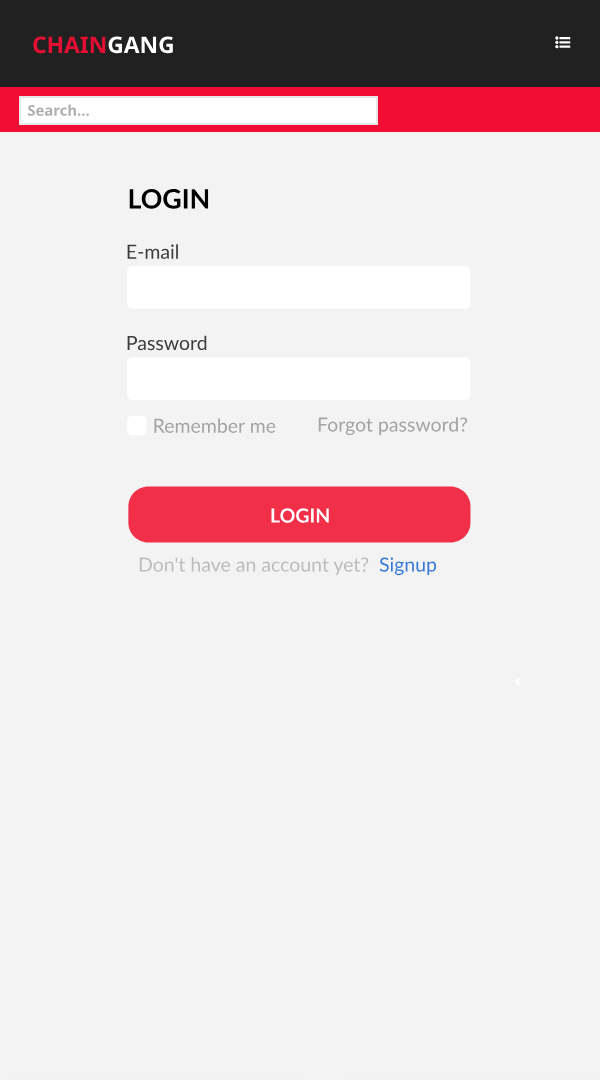
<style>
.page{position:relative;width:600px;height:1080px;background:#f3f3f3}
.page>*{position:absolute;margin:0}
.t1{font:22.8px "NotoSans-Bold";color:#e40f33}
.t2{font:22.8px "NotoSans-Bold";color:#ffffff}
.t3{font:14.8px "NotoSans-Bold";color:#aeaeae}
.t4{font:26.7px "Lato-Bold";color:#000000;text-transform:uppercase}
.t5{font:19.5px "Lato-Regular";color:#3d3d3d}
.t6{font:19.5px "Lato-Regular";color:#a3a3a3}
.t7{font:19.5px "Lato-Bold";color:#ffffff;text-transform:uppercase}
.t8{font:19.5px "Lato-Regular";color:#bcbcbc}
.t9{font:19.5px "Lato-Regular";color:#377ad7}
</style>
<div class="page">
<p class="t1" style="left:33px;top:36px;width:140px;height:18px">CHAIN<span class="t2">GANG</span></p>
<p class="t3" style="left:28px;top:104px;width:61px;height:12px">Search...</p>
<p class="t4" style="left:129px;top:189px;width:80px;height:20px">Login</p>
<p class="t5" style="left:127px;top:244px;width:51px;height:15px">E-mail</p>
<p class="t5" style="left:127px;top:335px;width:80px;height:16px">Password</p>
<p class="t6" style="left:154px;top:418px;width:122px;height:15px">Remember me</p>
<p class="t6" style="left:318px;top:417px;width:150px;height:18px">Forgot password?</p>
<p class="t7" style="left:271px;top:508px;width:58px;height:15px">Login</p>
<p class="t8" style="left:139px;top:557px;width:298px;height:19px">Don't have an account yet?  <span class="t9">Signup</span></p>
</div>
